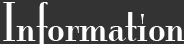
<style>
.page{position:relative;width:184px;height:44px;background:#333333}
.page>*{position:absolute;margin:0}
.t1{font:48px "MonaLisaSolidITCTT";color:#fefefe}
</style>
<div class="page">
<p class="t1" style="left:3px;top:2px;width:181px;height:42px">Travel Information</p>
</div>
